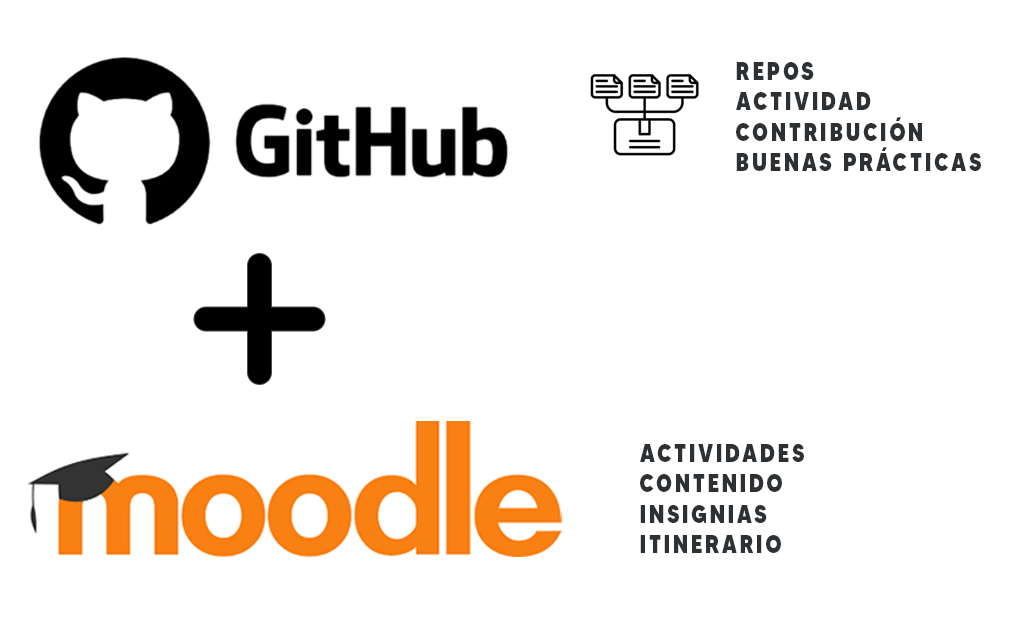
<style>
.page{position:relative;width:1024px;height:620px;background:#ffffff}
.page>*{position:absolute;margin:0}
.t1{font:25.3px "MADETOMMY-ExtraBold";letter-spacing:0.14em;color:#2e3133;text-transform:uppercase;scale:0.8 1}
</style>
<div class="page">
<p class="t1" style="left:736px;top:62px;width:245px;height:109px">REPOS<br>aCTIVIDAD<br>cONTRIBUCIÓN<br>bUENAS pRÁCTICAS</p>
<p class="t1" style="left:640px;top:444px;width:164px;height:109px">aCTIVIDADES<br>cONTENIDO<br>iNSIGNIAS<br>iTINERARIO</p>
</div>
